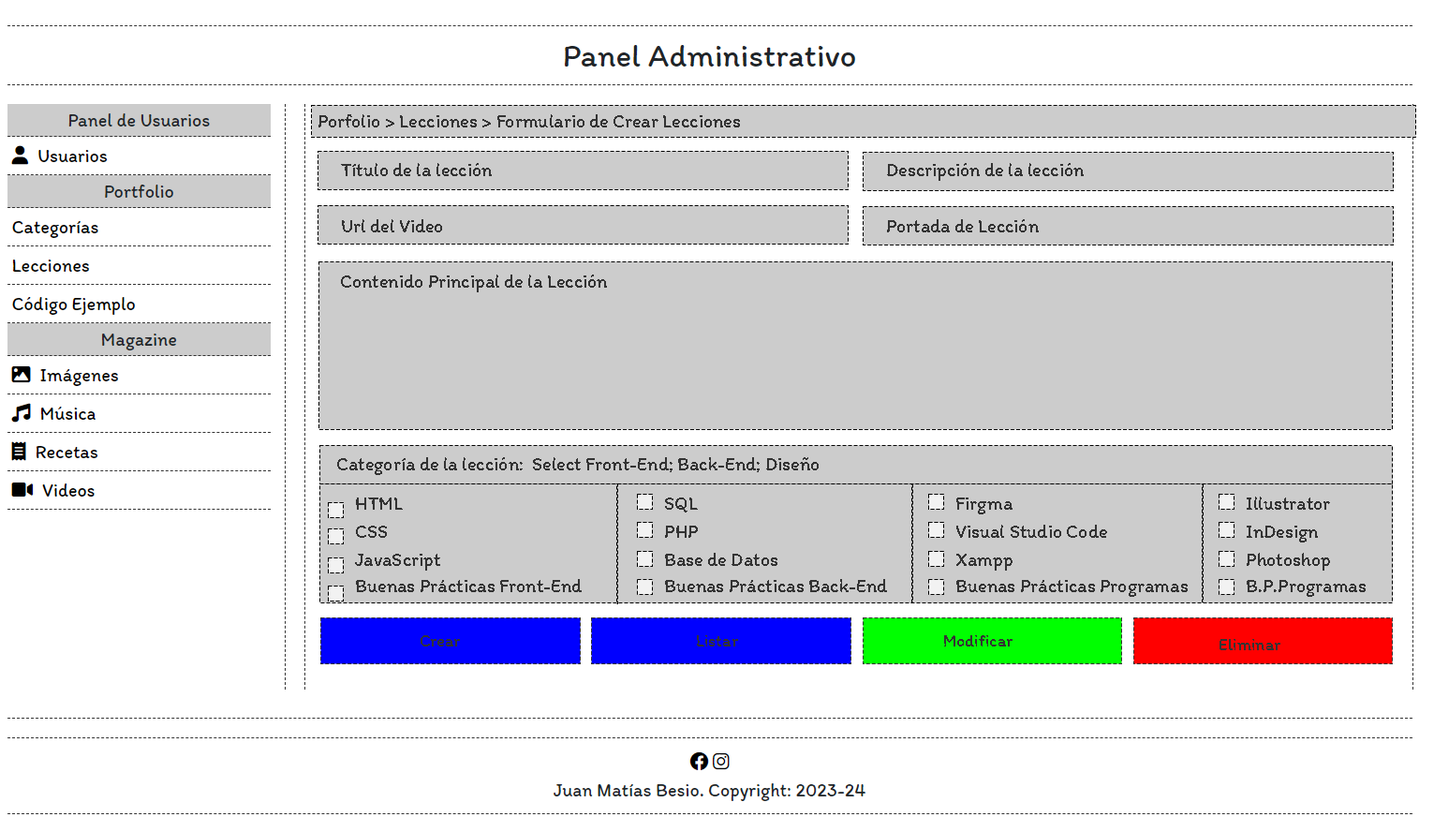
<style>
.page{position:relative;width:1434px;height:832px;background:#ffffff}
.page>*{position:absolute;margin:0}
.t1{font:18.7px "Itim-Regular";color:#333333}
.t2{font:16.9px "Itim-Regular";color:#333333}
</style>
<div class="page">
<p class="t1" style="left:318px;top:114px;width:422px;height:13px">Porfolio &gt; Lecciones &gt; Formulario de Crear Lecciones</p>
<p class="t1" style="left:341px;top:163px;width:151px;height:13px">Título de la lección</p>
<p class="t1" style="left:887px;top:163px;width:197px;height:18px">Descripción de la lección</p>
<p class="t1" style="left:342px;top:219px;width:100px;height:13px">Url del Video</p>
<p class="t1" style="left:887px;top:219px;width:152px;height:13px">Portada de Lección</p>
<p class="t1" style="left:341px;top:274px;width:266px;height:18px">Contenido Principal de la Lección</p>
<p class="t1" style="left:337px;top:457px;width:482px;height:18px">Categoría de la lección:  Select Front-End; Back-End; Diseño</p>
<p class="t1" style="left:356px;top:497px;width:47px;height:12px">HTML</p>
<p class="t1" style="left:665px;top:497px;width:33px;height:15px">SQL</p>
<p class="t1" style="left:956px;top:497px;width:56px;height:17px">Firgma</p>
<p class="t1" style="left:1247px;top:496px;width:83px;height:13px">Illustrator</p>
<p class="t1" style="left:356px;top:525px;width:31px;height:13px">CSS</p>
<p class="t1" style="left:665px;top:525px;width:33px;height:13px">PHP</p>
<p class="t1" style="left:956px;top:524px;width:151px;height:14px">Visual Studio Code</p>
<p class="t1" style="left:1247px;top:525px;width:71px;height:17px">InDesign</p>
<p class="t1" style="left:355px;top:553px;width:85px;height:17px">JavaScript</p>
<p class="t1" style="left:665px;top:553px;width:112px;height:13px">Base de Datos</p>
<p class="t1" style="left:956px;top:553px;width:56px;height:17px">Xampp</p>
<p class="t1" style="left:1247px;top:553px;width:83px;height:17px">Photoshop</p>
<p class="t1" style="left:356px;top:579px;width:226px;height:13px">Buenas Prácticas Front-End</p>
<p class="t1" style="left:665px;top:579px;width:222px;height:13px">Buenas Prácticas Back-End</p>
<p class="t1" style="left:956px;top:580px;width:232px;height:17px">Buenas Prácticas Programas</p>
<p class="t1" style="left:1247px;top:580px;width:118px;height:17px">B.P.Programas</p>
<p class="t2" style="left:421px;top:635px;width:39px;height:11px">Crear</p>
<p class="t2" style="left:697px;top:635px;width:41px;height:11px">Listar</p>
<p class="t2" style="left:944px;top:635px;width:68px;height:11px">Modificar</p>
<p class="t2" style="left:1219px;top:639px;width:61px;height:11px">Eliminar</p>
</div>
